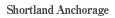
<style>
.page{position:relative;width:115px;height:18px;background:#ffffff}
.page>*{position:absolute;margin:0}
.t1{font:12px "RyuminPro-ExBold";letter-spacing:-0.04em;color:#4c4843;scale:0.9 1}
</style>
<div class="page">
<p class="t1" style="left:7px;top:4px;width:102px;height:12px">Shortland Anchorage</p>
</div>
